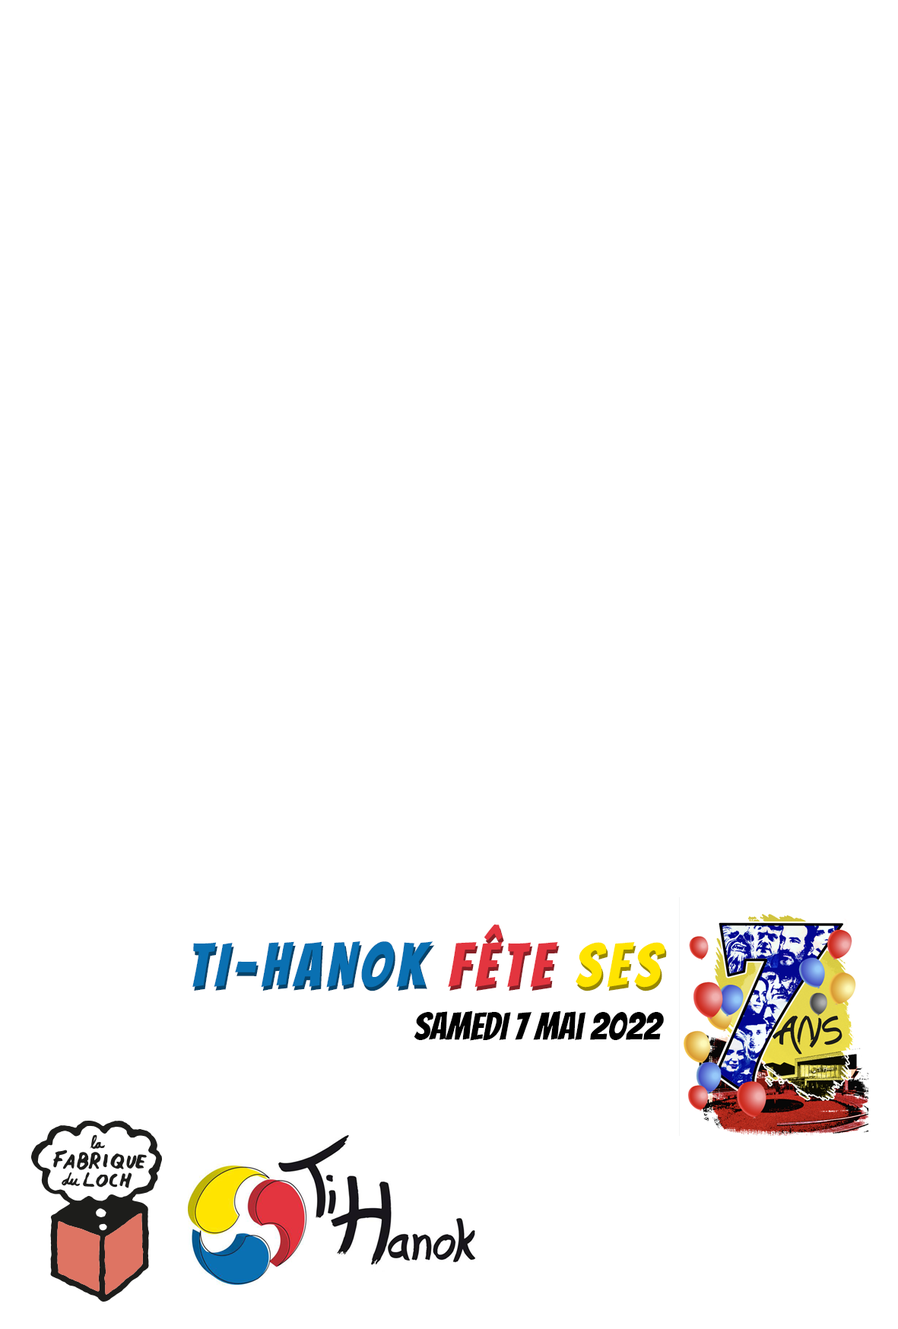
<style>
.page{position:relative;width:898px;height:1329px;background:#ffffff}
.page>*{position:absolute;margin:0}
.t1{font:60.8px "Bangers-Regular";letter-spacing:0.1em;color:#0a70b2}
.t2{font:60.8px "Bangers-Regular";letter-spacing:0.1em;color:#e3353f}
.t3{font:60.8px "Bangers-Regular";letter-spacing:0.1em;color:#ffe400}
.t4{font:38px "Bangers-Regular";color:#000000}
</style>
<div class="page">
<p class="t1" style="left:192px;top:923px;width:473px;height:64px">TI-HANOK <span class="t2">Fête </span><span class="t3">ses</span></p>
<p class="t1" style="left:194px;top:927px;width:473px;height:64px">TI-HANOK <span class="t2">Fête </span><span class="t3">ses</span></p>
<p class="t4" style="left:413px;top:1010px;width:250px;height:30px">SAMEDI 7 MAi 2022</p>
</div>
